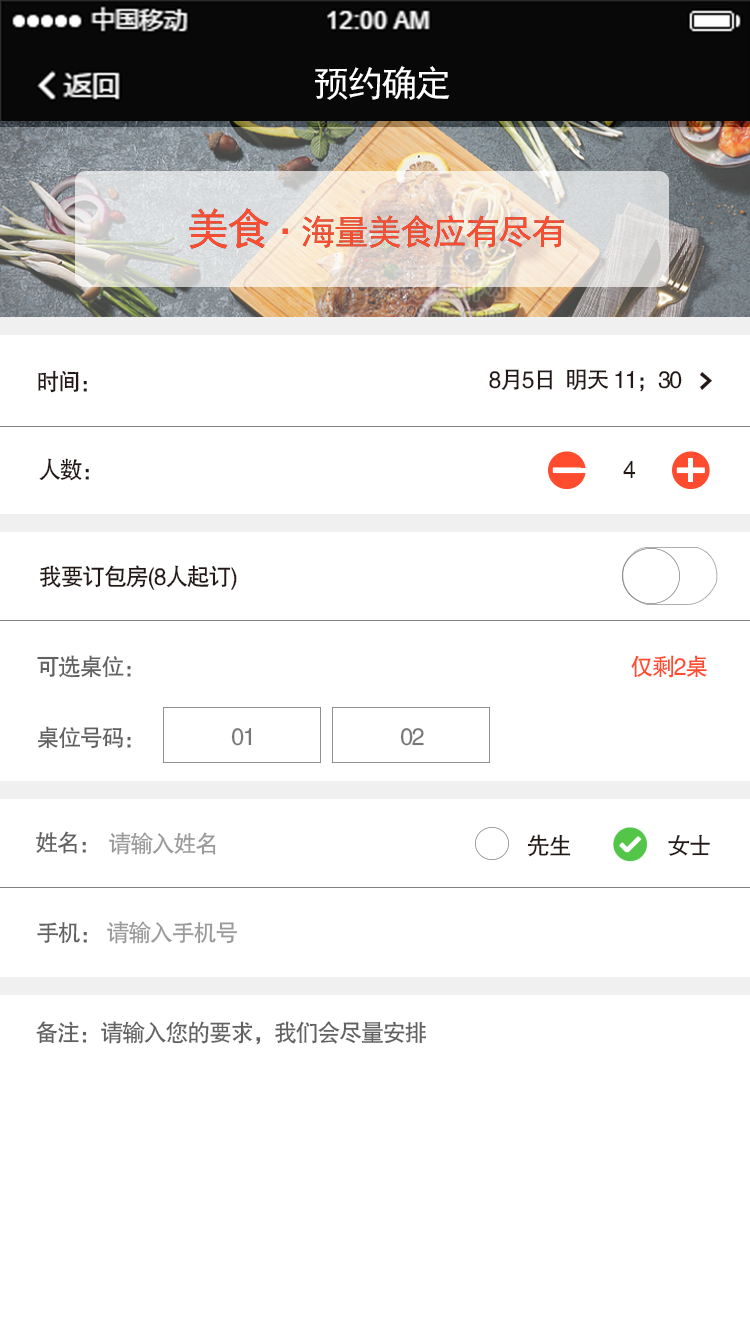
<style>
.page{position:relative;width:750px;height:1334px;background:#ffffff}
.page>*{position:absolute;margin:0}
.t1{font:36px "SimHei";letter-spacing:-0.06em;color:#ffffff}
.t2{font:34.7px "SimHei";letter-spacing:-0.06em;color:#ff4c2e}
.t3{font:43.3px "SimHei";letter-spacing:-0.06em;color:#ff4c2e}
.t4{font:24px "FZHTK--GBK1-0";letter-spacing:-0.06em;color:#231815;scale:0.96 1}
.t5{font:24px "FZHTK--GBK1-0";letter-spacing:-0.06em;color:#616161;scale:0.96 1}
.t6{font:24px "FZHTK--GBK1-0";letter-spacing:-0.06em;color:#ff4c2e;scale:0.96 1}
.t7{font:24px "FZHTK--GBK1-0";letter-spacing:-0.06em;color:#818182;scale:0.96 1}
.t8{font:24px "FZHTK--GBK1-0";letter-spacing:-0.06em;color:#89898f;scale:0.96 1}
</style>
<div class="page">
<p class="t1" style="left:315px;top:66px;width:135px;height:34px">预约确定</p>
<p class="t2" style="left:189px;top:208px;width:375px;height:41px"><span class="t3">美食</span>·海量美食应有尽有</p>
<p class="t4" style="left:38px;top:370px;width:49px;height:23px">时间：</p>
<p class="t4" style="left:489px;top:369px;width:193px;height:23px">8月5日  明天 11；30</p>
<p class="t4" style="left:39px;top:458px;width:50px;height:23px">人数：</p>
<p class="t4" style="left:623px;top:460px;width:13px;height:19px">4</p>
<p class="t4" style="left:40px;top:565px;width:197px;height:25px">我要订包房(8人起订)</p>
<p class="t5" style="left:37px;top:655px;width:94px;height:23px">可选桌位：</p>
<p class="t6" style="left:631px;top:655px;width:76px;height:23px">仅剩2桌</p>
<p class="t5" style="left:37px;top:726px;width:94px;height:23px">桌位号码：</p>
<p class="t7" style="left:231px;top:727px;width:21px;height:19px">01</p>
<p class="t7" style="left:400px;top:728px;width:24px;height:18px">02</p>
<p class="t5" style="left:36px;top:831px;width:50px;height:23px">姓名：</p>
<p class="t8" style="left:109px;top:832px;width:107px;height:23px">请输入姓名</p>
<p class="t4" style="left:527px;top:834px;width:44px;height:23px">先生</p>
<p class="t4" style="left:668px;top:834px;width:42px;height:22px">女士</p>
<p class="t5" style="left:37px;top:922px;width:50px;height:22px">手机：</p>
<p class="t8" style="left:107px;top:921px;width:130px;height:23px">请输入手机号</p>
<p class="t5" style="left:36px;top:1021px;width:391px;height:24px">备注：请输入您的要求，我们会尽量安排</p>
</div>
